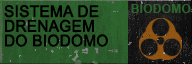
<style>
.page{position:relative;width:192px;height:64px}
.page>*{position:absolute;margin:0}
.t1{font:16px/14.7px "ArialMT";color:#000000;text-transform:uppercase;font-weight:bold;scale:0.95 1}
.t2{font:12px "Arial-BoldMT";letter-spacing:0.02em;color:#2d642d;text-transform:uppercase}
</style>
<div class="page">
<p class="t1" style="left:4px;top:5px;width:104px;height:42px">sistema de<br>drenagem<br>do biodomo</p>
<p class="t2" style="left:131px;top:4px;width:60px;height:9px">BIODOMO</p>
</div>
